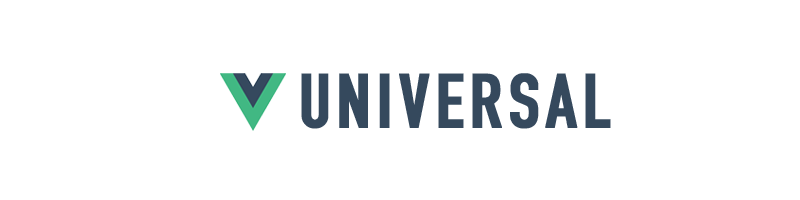
<style>
.page{position:relative;width:800px;height:200px;background:#ffffff}
.page>*{position:absolute;margin:0}
.t1{font:75px "DINCondensed-Bold";letter-spacing:0.06em;color:#35495d;font-weight:bold}
</style>
<div class="page">
<p class="t1" style="left:301px;top:73px;width:310px;height:56px">UNIVERSAL</p>
</div>
